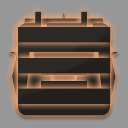
<style>
.page{position:relative;width:128px;height:128px;background:#979797}
.page>*{position:absolute;margin:0}
.t1{font:100px "Wundercon-Regular";letter-spacing:-0.05em}
.t2{font:100px "Wundercon-Regular";letter-spacing:-0.05em;color:#23201e}
.t3{font:100px "Wundercon-Regular";letter-spacing:-0.05em;color:#2b2826}
</style>
<div class="page">
<p class="t1" style="left:18px;top:11px;width:92px;height:105px">H</p>
<p class="t2" style="left:18px;top:11px;width:92px;height:105px">H</p>
<p class="t3" style="left:18px;top:27px;width:93px;height:77px">B</p>
<p class="t2" style="left:18px;top:27px;width:93px;height:77px">B</p>
</div>
